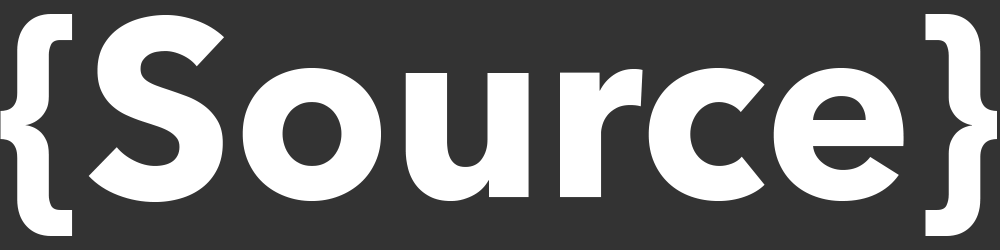
<style>
.page{position:relative;width:1000px;height:250px;background:#333333}
.page>*{position:absolute;margin:0}
.t1{font:250px "AvenirNext-Bold";color:#ffffff}
</style>
<div class="page">
<p class="t1" style="left:0px;top:14px;width:997px;height:222px">{Source}</p>
</div>
